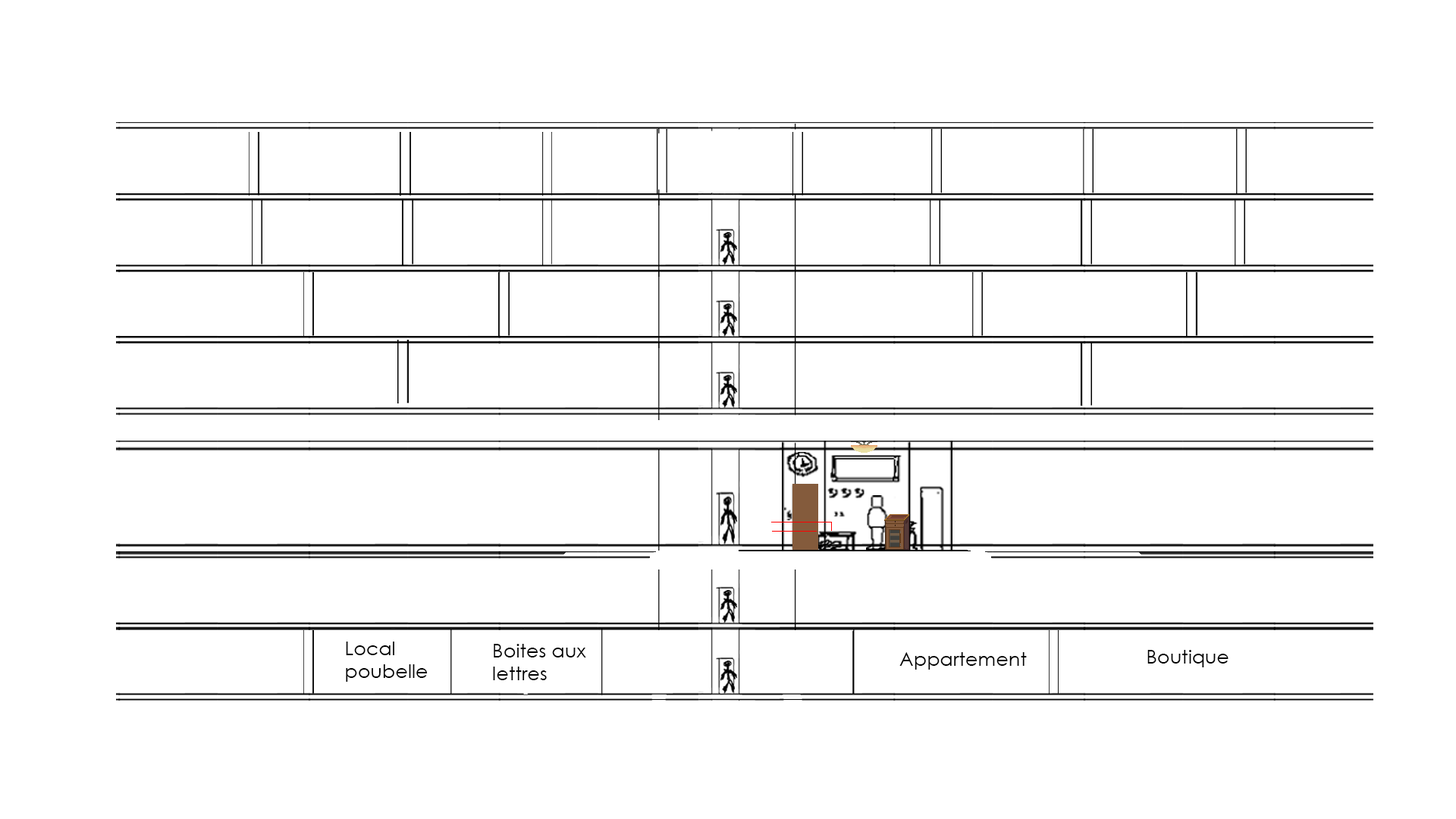
<style>
.page{position:relative;width:1456px;height:819px;background:#ffffff}
.page>*{position:absolute;margin:0}
.t1{font:19.3px "CenturyGothic";color:#000000}
</style>
<div class="page">
<p class="t1" style="left:346px;top:642px;width:82px;height:40px;text-align:right">Local<br>poubelle</p>
<p class="t1" style="left:493px;top:644px;width:93px;height:36px;text-align:right">Boites aux<br>lettres</p>
<p class="t1" style="left:899px;top:652px;width:128px;height:18px">Appartement</p>
<p class="t1" style="left:1147px;top:650px;width:81px;height:17px">Boutique</p>
</div>
